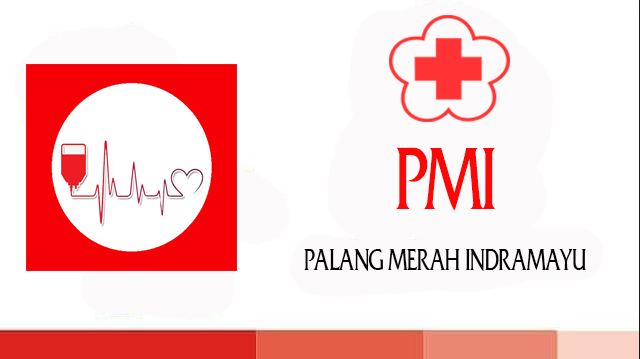
<style>
.page{position:relative;width:640px;height:359px;background:#ffffff}
.page>*{position:absolute;margin:0}
.t1{font:80px "AllianceCondensedRegularSWFTE";letter-spacing:-0.02em;color:#fc0606;text-transform:uppercase}
.t2{font:26.7px "AllianceCondensedRegularSWFTE";letter-spacing:-0.02em;color:#040404;text-transform:uppercase}
</style>
<div class="page">
<p class="t1" style="left:396px;top:147px;width:99px;height:64px">pmi</p>
<p class="t2" style="left:304px;top:249px;width:282px;height:22px">PALANG MERAH INDRAMAYU</p>
</div>
